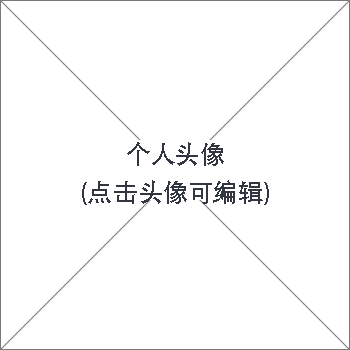
<style>
.page{position:relative;width:350px;height:350px;background:#ffffff}
.page>*{position:absolute;margin:0}
.t1{font:25.4px "AdobeHeitiStd-Regular";color:#313641}
</style>
<div class="page">
<p class="t1" style="left:127px;top:142px;width:97px;height:24px">个人头像</p>
<p class="t1" style="left:82px;top:180px;width:187px;height:25px">(点击头像可编辑)</p>
</div>
